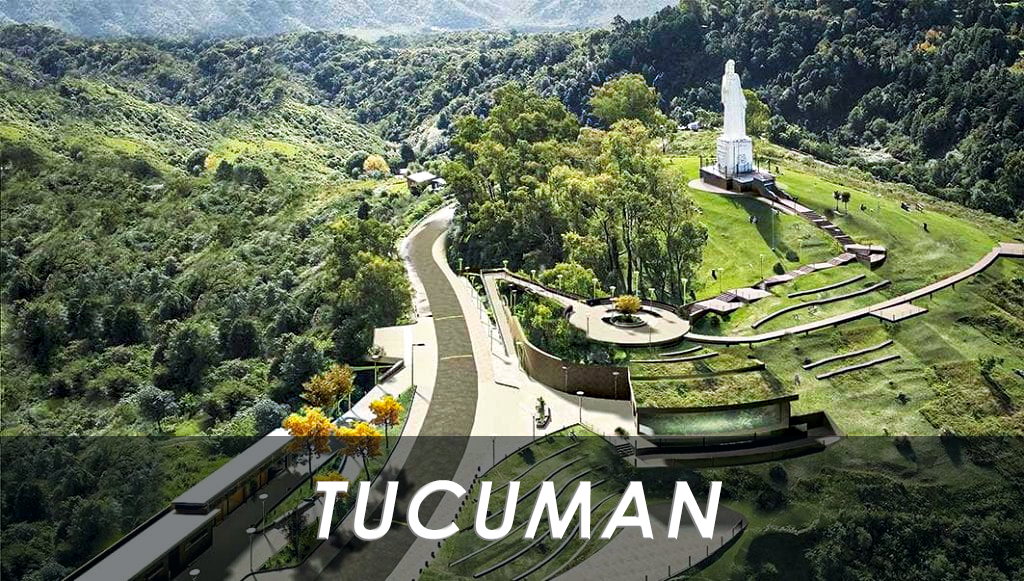
<style>
.page{position:relative;width:1024px;height:581px}
.page>*{position:absolute;margin:0}
.t1{font:80px "CenturyGothic-Bold";letter-spacing:0.05em;color:#ffffff;font-style:italic}
</style>
<div class="page">
<p class="t1" style="left:314px;top:480px;width:408px;height:61px">TUCUMAN</p>
</div>
